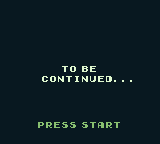
<style>
.page{position:relative;width:160px;height:144px;background:#081820}
.page>*{position:absolute;margin:0}
.t1{font:8px "Early-GameBoy";color:#e0f8d0}
.t2{font:8px "Early-GameBoy";color:#88c070}
</style>
<div class="page">
<p class="t1" style="left:42px;top:66px;width:90px;height:16px;text-align:center">To Be<br>     Continued...</p>
<p class="t2" style="left:38px;top:122px;width:82px;height:6px">Press Start</p>
</div>
